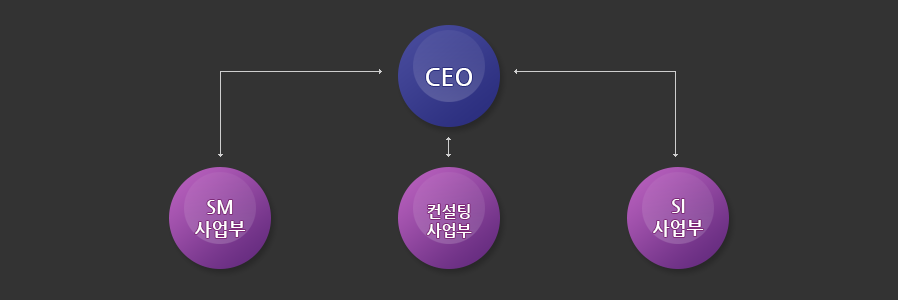
<style>
.page{position:relative;width:898px;height:300px;background:#333333}
.page>*{position:absolute;margin:0}
.t1{font:24px "NanumGothicBold";color:#ffffff}
.t2{font:18px "NanumGothicBold";color:#ffffff}
.t3{font:16px "NanumGothicBold";color:#ffffff}
</style>
<div class="page">
<p class="t1" style="left:426px;top:68px;width:46px;height:18px">CEO</p>
<p class="t2" style="left:195px;top:200px;width:51px;height:38px;text-align:center">SM<br>사업부</p>
<p class="t3" style="left:426px;top:204px;width:46px;height:34px;text-align:center">컨설팅<br>사업부</p>
<p class="t2" style="left:653px;top:199px;width:51px;height:38px;text-align:center">SI<br>사업부</p>
</div>
